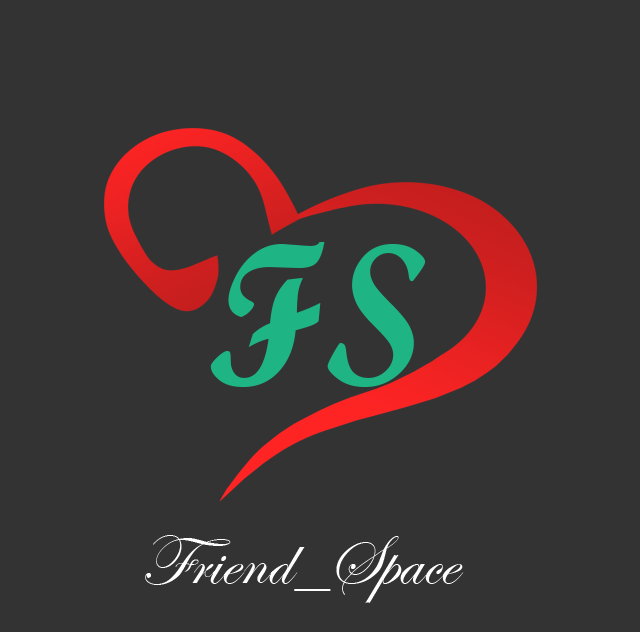
<style>
.page{position:relative;width:640px;height:632px;background:#333333}
.page>*{position:absolute;margin:0}
.t1{font:203.2px "ScriptMTBold";color:#1eb484;scale:0.96 1}
.t2{font:72px "EdwardianScriptITC";color:#ffffff}
</style>
<div class="page">
<p class="t1" style="left:210px;top:242px;width:216px;height:145px">FS</p>
<p class="t2" style="left:145px;top:535px;width:319px;height:68px">Friend_Space</p>
</div>
